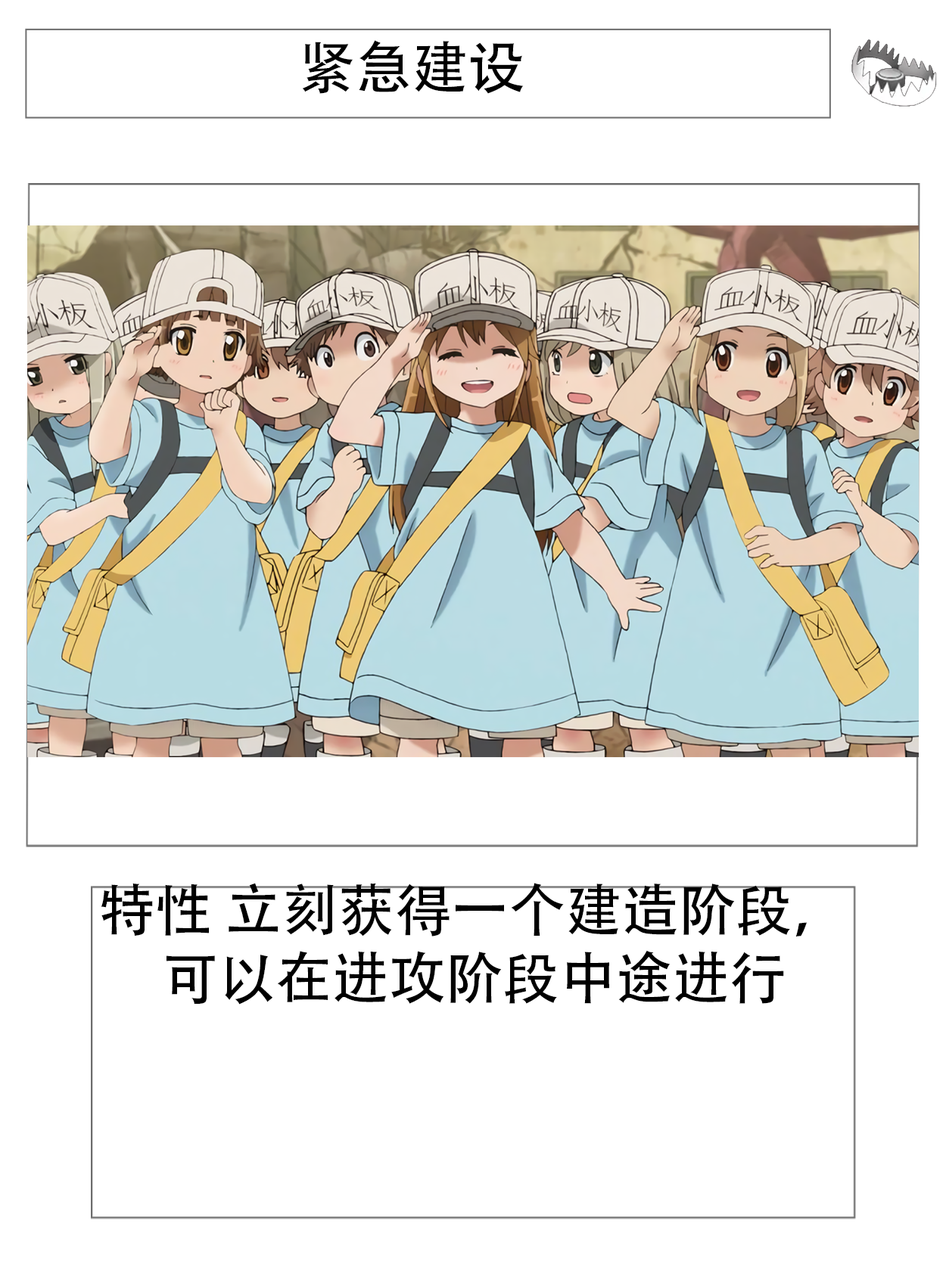
<style>
.page{position:relative;width:946px;height:1261px;background:#ffffff}
.page>*{position:absolute;margin:0}
.t1{font:56.7px "AdobeHeitiStd-Regular";color:#000000}
</style>
<div class="page">
<p class="t1" style="left:302px;top:40px;width:221px;height:54px">紧急建设</p>
<p class="t1" style="left:101px;top:883px;width:705px;height:122px;text-align:center">特性 立刻获得一个建造阶段，可以在进攻阶段中途进行</p>
</div>
